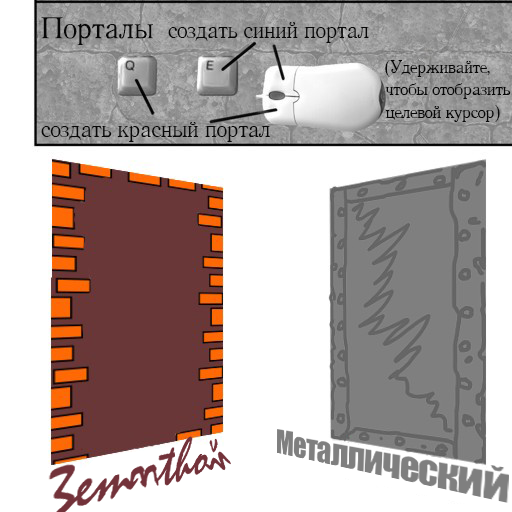
<style>
.page{position:relative;width:512px;height:512px;background:#ffffff}
.page>*{position:absolute;margin:0}
.t1{font:50.5px "Literaturnaya-Plain";letter-spacing:-0.07em;color:#080808}
.t2{font:39px "Literaturnaya-Plain";letter-spacing:-0.08em;color:#080808}
.t3{font:29.9px/22.5px "Literaturnaya-Plain";letter-spacing:-0.085em;color:#080808}
.t4{font:38.2px "Literaturnaya-Plain";letter-spacing:-0.08em;color:#080808;scale:1.03 1}
</style>
<div class="page">
<p class="t1" style="left:41px;top:17px;width:112px;height:28px">Порталы</p>
<p class="t2" style="left:168px;top:22px;width:201px;height:21px">создать синий портал</p>
<p class="t3" style="left:385px;top:60px;width:126px;height:62px">(Удерживайте,<br>чтобы отобразить<br>целевой курсор)</p>
<p class="t4" style="left:41px;top:122px;width:229px;height:20px">создать красный портал</p>
</div>
